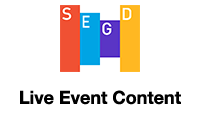
<style>
.page{position:relative;width:200px;height:120px;background:#ffffff}
.page>*{position:absolute;margin:0}
.t1{font:18px "HelveticaNeueLTPro-Bd";color:#000000}
</style>
<div class="page">
<p class="t1" style="left:20px;top:90px;width:161px;height:15px">Live Event Content</p>
</div>
